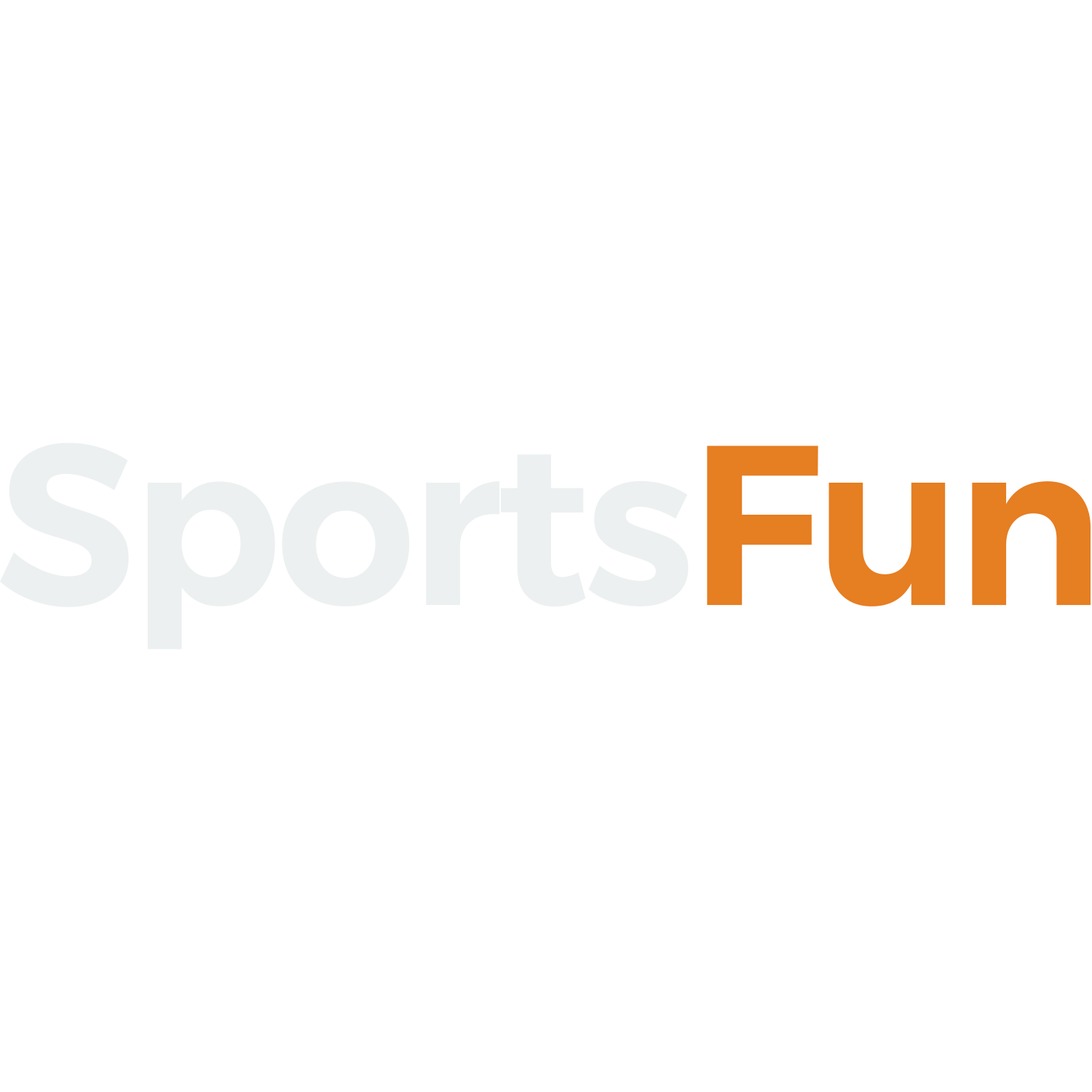
<style>
.page{position:relative;width:1092px;height:1092px;background:#ffffff}
.page>*{position:absolute;margin:0}
.t1{font:227.3px "Montserrat-SemiBold";letter-spacing:-0.025em;color:#ecf0f1;scale:0.97 1}
.t2{font:227.3px "Montserrat-SemiBold";letter-spacing:-0.025em;color:#e67e22;scale:0.97 1}
</style>
<div class="page">
<p class="t1" style="left:0px;top:443px;width:689px;height:206px">Sports</p>
<p class="t2" style="left:707px;top:446px;width:384px;height:160px">Fun</p>
</div>
